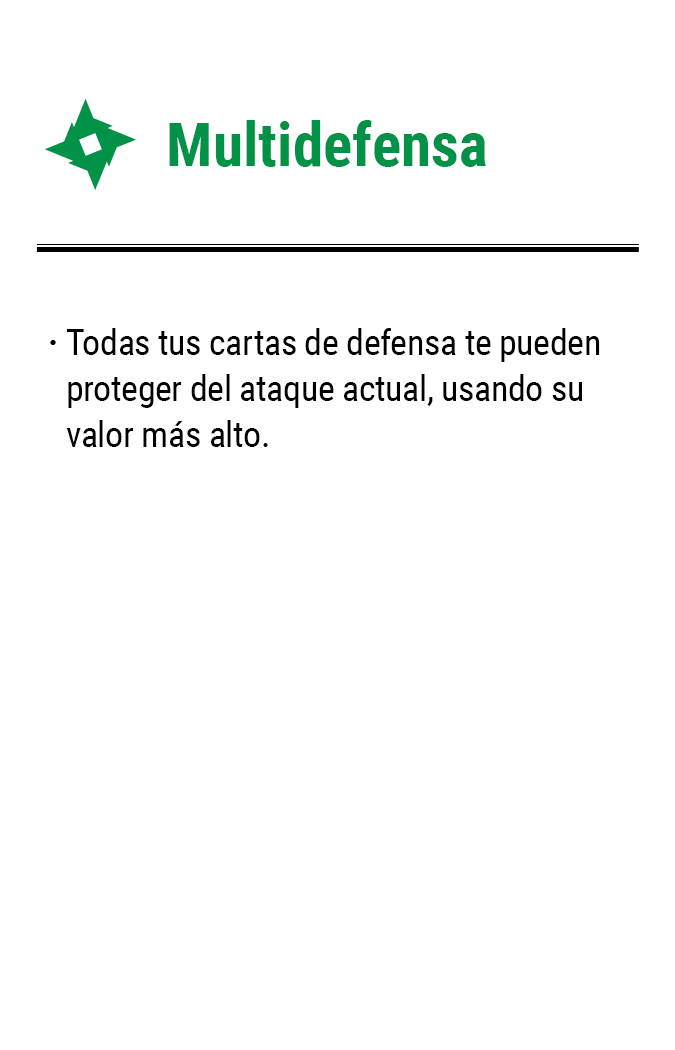
<style>
.page{position:relative;width:675px;height:1050px;background:#ffffff}
.page>*{position:absolute;margin:0}
.t1{font:61.2px "RobotoCondensed-Bold";color:#019147}
.t2{font:35.8px/45.8px "RobotoCondensed-Regular";letter-spacing:-0.01em;color:#000000}
.t3{font:35.8px "RobotoCondensed-Bold";letter-spacing:-0.01em;color:#000000}
</style>
<div class="page">
<p class="t1" style="left:169px;top:120px;width:317px;height:47px">Multidefensa</p>
<p class="t2" style="left:66px;top:328px;width:534px;height:119px">Todas tus cartas de defensa te pueden proteger del ataque actual, usando su valor más alto.</p>
<p class="t3" style="left:50px;top:340px;width:6px;height:5px">·</p>
</div>
